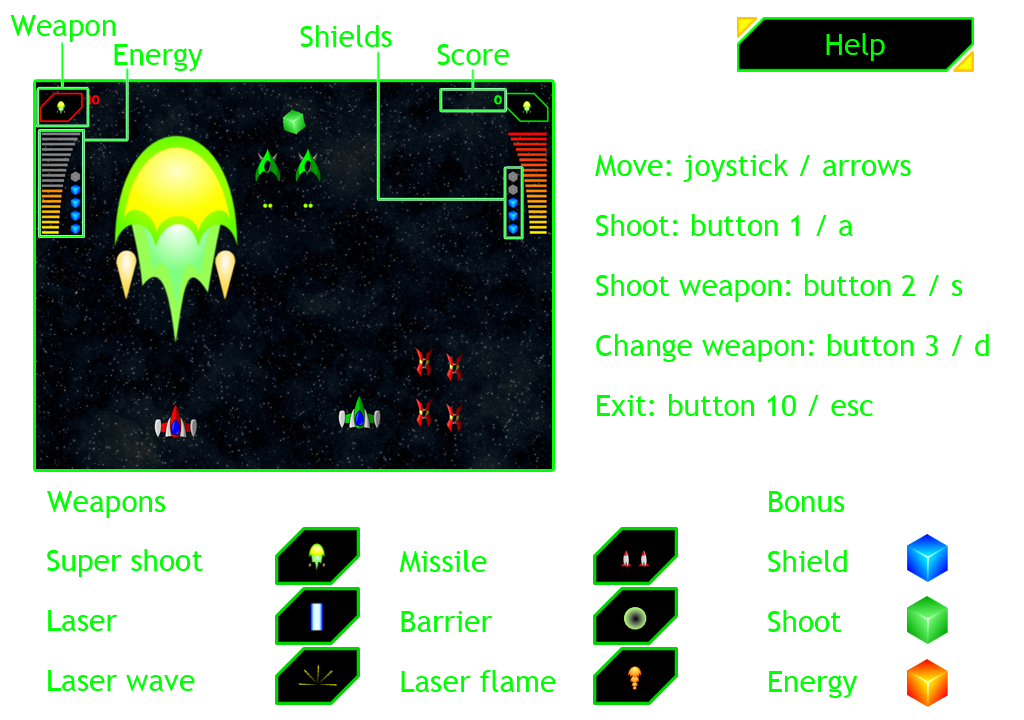
<style>
.page{position:relative;width:1024px;height:720px;background:#ffffff}
.page>*{position:absolute;margin:0}
.t1{font:30px "TrebuchetMS";color:#00ff00}
.t2{font:30px/60px "TrebuchetMS";color:#00ff00}
.t3{font:30px/48px "TrebuchetMS";color:#00ff00}
</style>
<div class="page">
<p class="t1" style="left:10px;top:15px;width:106px;height:27px">Weapon</p>
<p class="t1" style="left:300px;top:25px;width:92px;height:22px">Shields</p>
<p class="t1" style="left:826px;top:33px;width:59px;height:28px">Help</p>
<p class="t1" style="left:114px;top:44px;width:89px;height:27px">Energy</p>
<p class="t1" style="left:437px;top:44px;width:72px;height:21px">Score</p>
<p class="t2" style="left:595px;top:154px;width:394px;height:262px">Move: joystick / arrows<br>Shoot: button 1 / a<br>Shoot weapon: button 2 / s<br>Change weapon: button 3 / d<br>Exit: button 10 / esc</p>
<p class="t1" style="left:47px;top:491px;width:119px;height:27px">Weapons</p>
<p class="t2" style="left:768px;top:491px;width:90px;height:207px">Bonus<br>Shield<br>Shoot<br>Energy</p>
<p class="t2" style="left:47px;top:549px;width:156px;height:142px"><span class="t3">S</span>uper shoot<br>Laser<br>Laser wave</p>
<p class="t2" style="left:399px;top:550px;width:157px;height:142px">Missile<br>Barrier<br>Laser flame</p>
</div>
